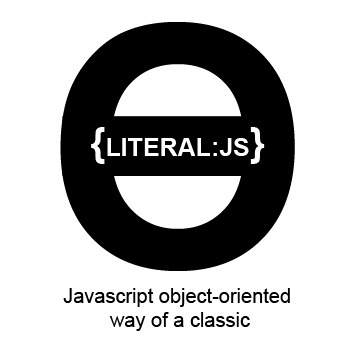
<style>
.page{position:relative;width:349px;height:346px;background:#ffffff}
.page>*{position:absolute;margin:0}
.t1{font:337.2px "Arial-BoldMT";color:#000000}
.t2{font:25px "Arial-BoldMT";color:#ffffff}
.t3{font:40px "Arial-BoldMT";color:#ffffff}
.t4{font:20px "ArialMT";color:#000000}
</style>
<div class="page">
<p class="t1" style="left:60px;top:22px;width:235px;height:249px">O</p>
<p class="t2" style="left:91px;top:127px;width:174px;height:37px"><span class="t3">{</span>LITERAL:JS<span class="t3">}</span></p>
<p class="t4" style="left:63px;top:288px;width:227px;height:43px;text-align:center">Javascript object-oriented <br>way of a classic</p>
</div>
